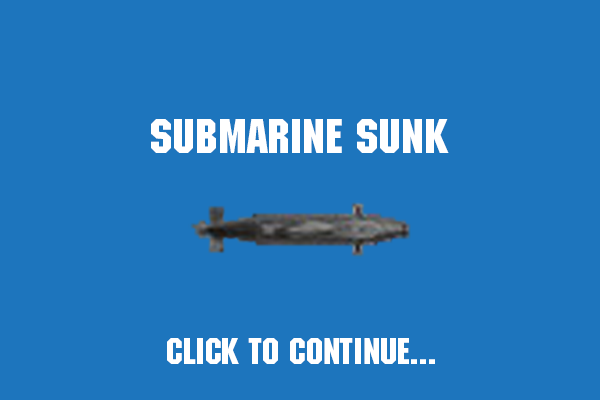
<style>
.page{position:relative;width:600px;height:400px;background:#1d75bd}
.page>*{position:absolute;margin:0}
.t1{font:48px "MachineStd";color:#ffffff}
.t2{font:36px "MachineStd";color:#ffffff}
</style>
<div class="page">
<p class="t1" style="left:151px;top:119px;width:298px;height:34px">SubMarine sunk</p>
<p class="t2" style="left:167px;top:338px;width:268px;height:26px">Click to continue...</p>
</div>
